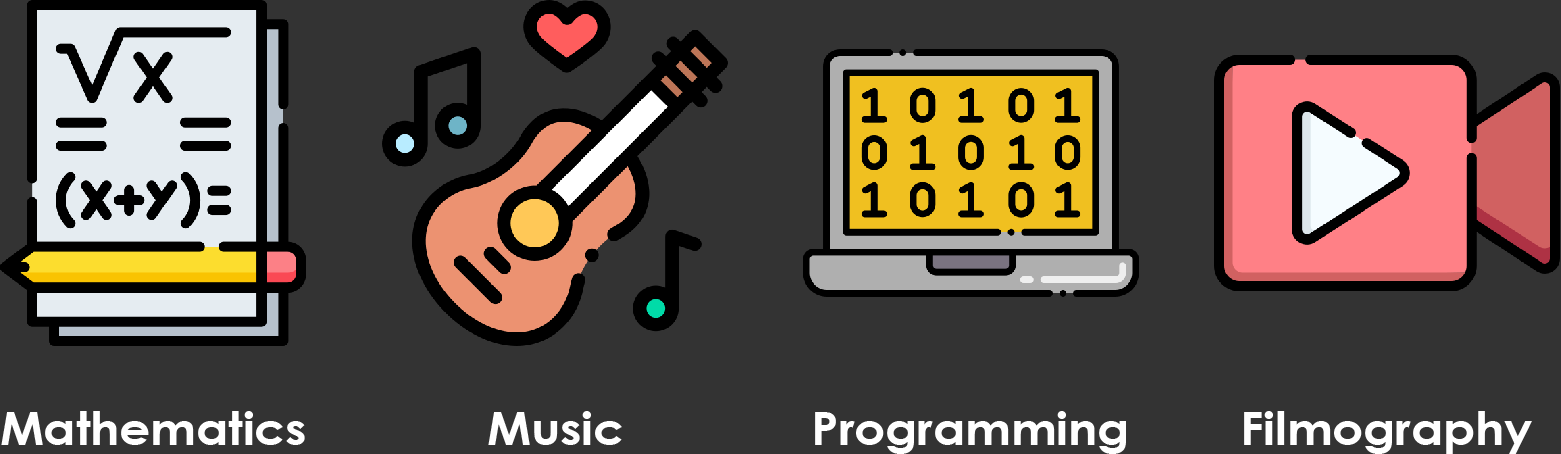
<style>
.page{position:relative;width:1561px;height:454px;background:#333333}
.page>*{position:absolute;margin:0}
.t1{font:46.3px "CenturyGothic-Bold";color:#ffffff;scale:1.05 1}
</style>
<div class="page">
<p class="t1" style="left:1px;top:411px;width:304px;height:34px">Mathematics</p>
<p class="t1" style="left:488px;top:411px;width:134px;height:34px">Music</p>
<p class="t1" style="left:815px;top:411px;width:311px;height:43px">Programming</p>
<p class="t1" style="left:1244px;top:411px;width:288px;height:43px">Filmography</p>
</div>
